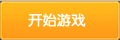
<style>
.page{position:relative;width:120px;height:40px}
.page>*{position:absolute;margin:0}
.t1{font:14px "FZY3JW--GB1-0";color:#ffffff;font-weight:bold}
</style>
<div class="page">
<p class="t1" style="left:28px;top:13px;width:58px;height:14px">开始游戏</p>
</div>
